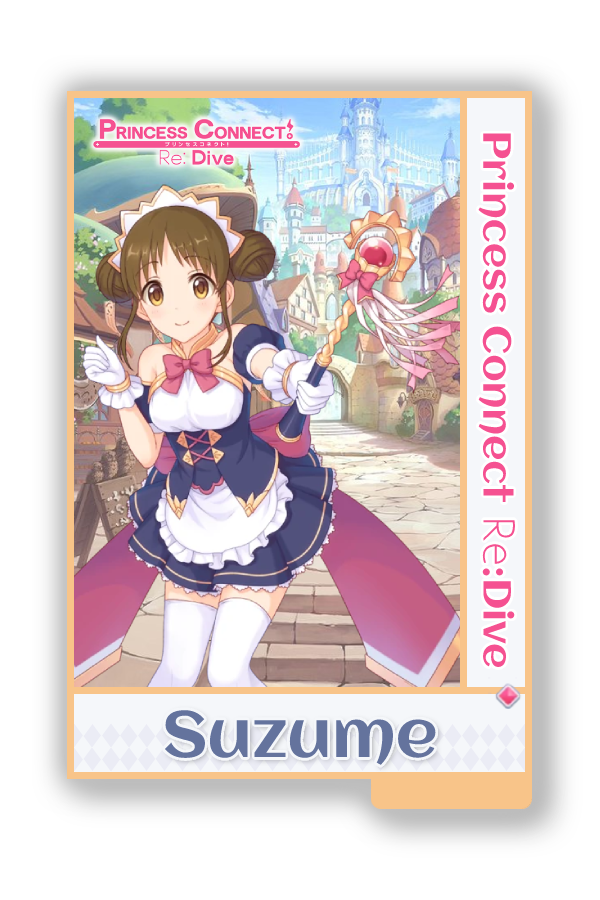
<style>
.page{position:relative;width:600px;height:900px;background:#ffffff}
.page>*{position:absolute;margin:0}
.t1{font:39px "Aclonica-Regular";color:#f55191}
.t2{font:39px "AaarghNormal";color:#f55191}
.t3{font:65px "Aclonica-Regular";color:#64739d}
</style>
<div class="page">
<p class="t1" style="left:478px;top:133px;width:38px;height:534px;rotate:90deg">Princess Connect <span class="t2">Re</span>:Dive</p>
<p class="t3" style="left:164px;top:710px;width:272px;height:55px">Suzume</p>
</div>
